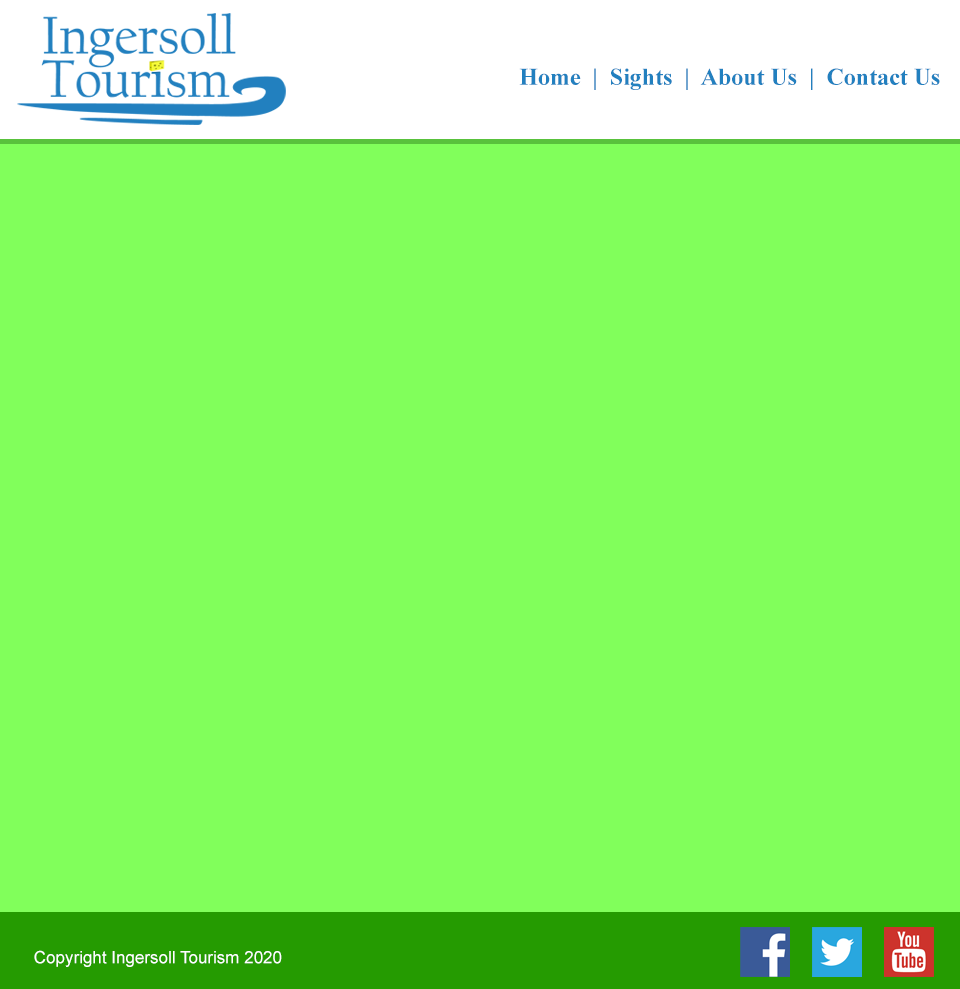
<style>
.page{position:relative;width:960px;height:989px;background:#81ff5b}
.page>*{position:absolute;margin:0}
.t1{font:24px "TimesNewRomanPS-BoldMT";color:#2280bf}
.t2{font:17px "ArialMT";color:#ffffff}
</style>
<div class="page">
<p class="t1" style="left:519px;top:68px;width:421px;height:22px">Home  |  Sights  |  About Us  |  Contact Us</p>
<p class="t2" style="left:34px;top:950px;width:248px;height:17px">Copyright Ingersoll Tourism 2020</p>
</div>
